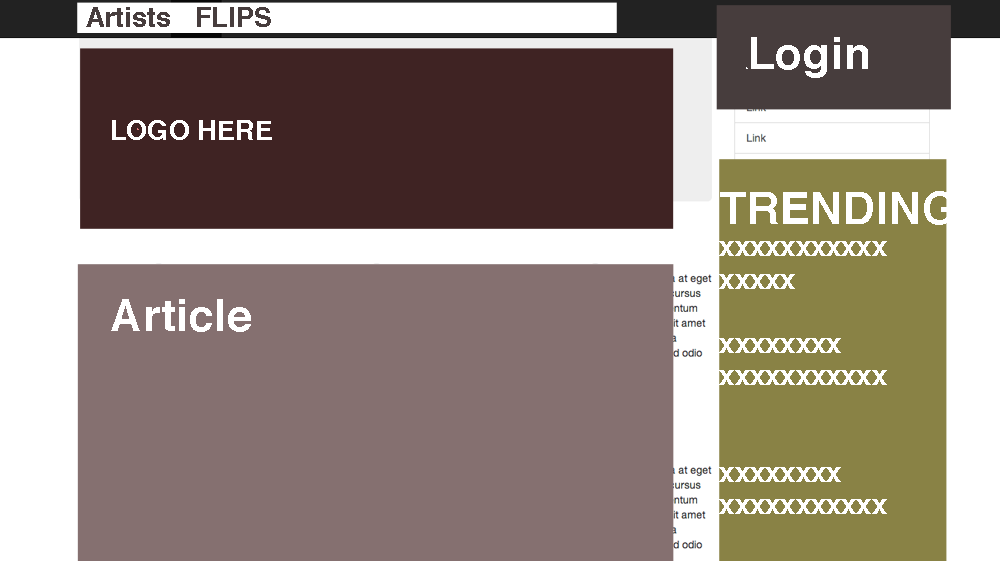
<style>
.page{position:relative;width:1000px;height:561px;background:#857070}
.page>*{position:absolute;margin:0}
.t1{font:26.9px "Helvetica-Bold";letter-spacing:0.01em;color:#473d3d}
.t2{font:44.8px "Helvetica-Bold";letter-spacing:0.01em;color:#ffffff}
.t3{font:3px "Helvetica-Bold";letter-spacing:0.01em;color:#ffffff}
.t4{font:26.9px "Helvetica-Bold";letter-spacing:0.01em;color:#ffffff}
.t5{font:3px "Helvetica-Bold";letter-spacing:0.01em;color:#e78282}
.t6{font:44.8px/6.3px "Helvetica-Bold";letter-spacing:0.01em;color:#ffffff}
</style>
<div class="page">
<p class="t1" style="left:86px;top:7px;width:185px;height:20px">Artists   FLIPS</p>
<p class="t2" style="left:746px;top:37px;width:122px;height:41px"><span class="t3">L</span>Login</p>
<p class="t4" style="left:112px;top:120px;width:160px;height:20px">LOGO HERE</p>
<p class="t5" style="left:137px;top:128px;width:2px;height:2px">L</p>
<p class="t4" style="left:719px;top:191px;width:235px;height:323px"><span class="t6">TRENDING<br></span>xxxxxxxxxxx<br>xxxxx<br><br>xxxxxxxx<br>xxxxxxxxxxx<br><br><br>xxxxxxxx<br>xxxxxxxxxxx</p>
<p class="t2" style="left:111px;top:299px;width:140px;height:33px">Article</p>
</div>
